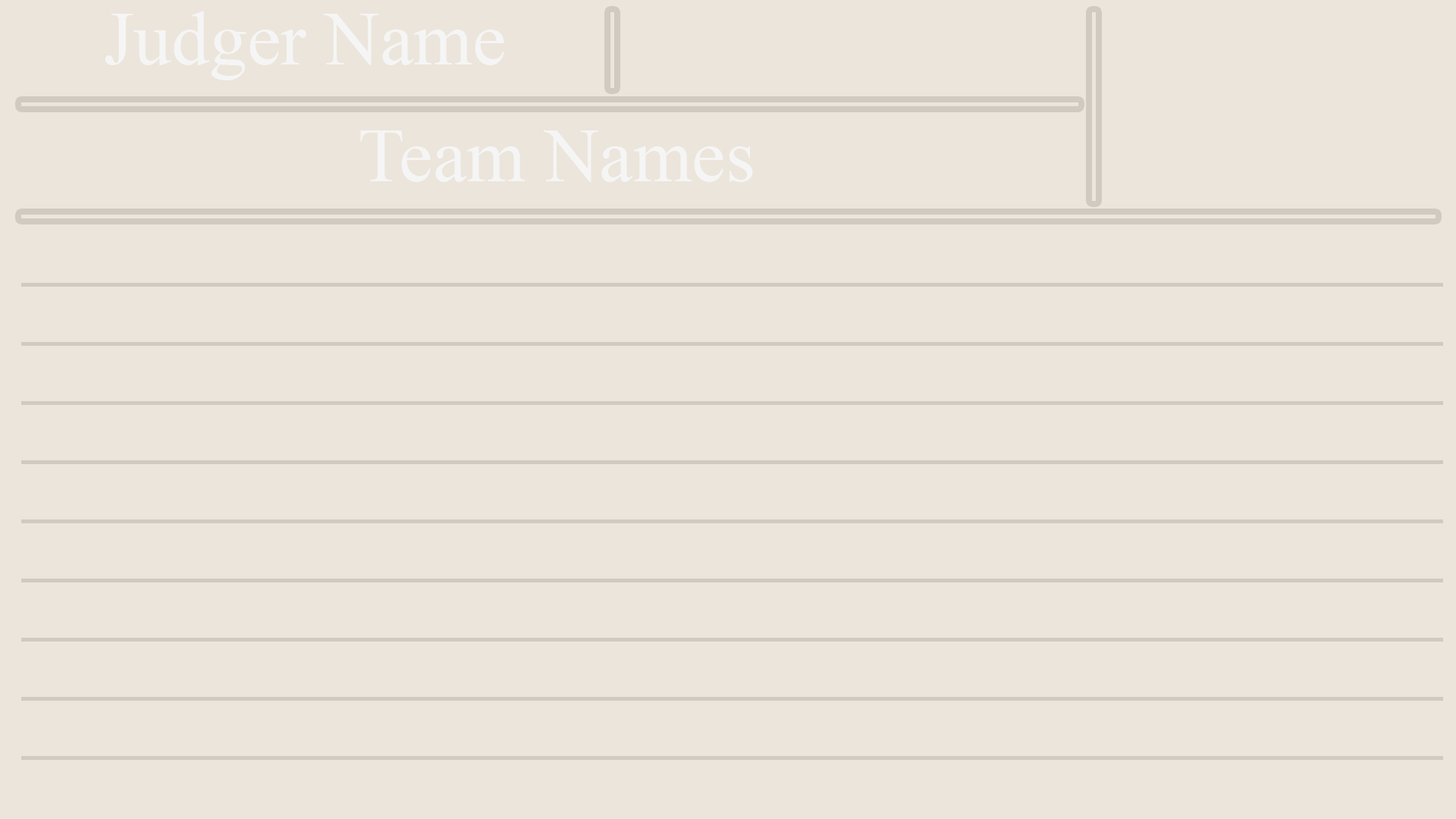
<style>
.page{position:relative;width:1456px;height:819px;background:#ece5db}
.page>*{position:absolute;margin:0}
.t1{font:75.8px "TimesNewRomanPSMT";color:#f5f5f5}
</style>
<div class="page">
<p class="t1" style="left:105px;top:11px;width:399px;height:69px">Judger Name</p>
<p class="t1" style="left:360px;top:130px;width:393px;height:52px">Team Names</p>
</div>
